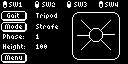
<style>
.page{position:relative;width:128px;height:64px;background:#000000}
.page>*{position:absolute;margin:0}
.t1{font:8px "6pxNormal";color:#ffffff}
</style>
<div class="page">
<p class="t1" style="left:9px;top:2px;width:13px;height:5px">SW1</p>
<p class="t1" style="left:42px;top:2px;width:13px;height:5px">SW2</p>
<p class="t1" style="left:74px;top:2px;width:13px;height:5px">SW3</p>
<p class="t1" style="left:105px;top:2px;width:13px;height:5px">SW4</p>
<p class="t1" style="left:7px;top:13px;width:12px;height:5px">Gait</p>
<p class="t1" style="left:36px;top:13px;width:21px;height:6px">Tripod</p>
<p class="t1" style="left:5px;top:24px;width:17px;height:5px">Mode</p>
<p class="t1" style="left:36px;top:24px;width:22px;height:5px">Strafe</p>
<p class="t1" style="left:3px;top:34px;width:21px;height:5px">Phase:</p>
<p class="t1" style="left:36px;top:34px;width:3px;height:5px">1</p>
<p class="t1" style="left:3px;top:44px;width:22px;height:6px">Height:</p>
<p class="t1" style="left:36px;top:44px;width:11px;height:5px">100</p>
<p class="t1" style="left:5px;top:55px;width:17px;height:5px">Menu</p>
</div>
